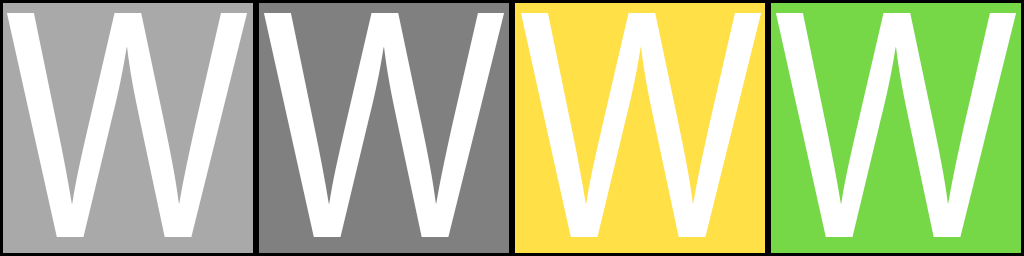
<style>
.page{position:relative;width:1024px;height:256px;background:#ffffff}
.page>*{position:absolute;margin:0}
.t1{font:332.5px "MyriadPro-Regular";color:#ffffff;scale:0.88 1}
</style>
<div class="page">
<p class="t1" style="left:7px;top:13px;width:240px;height:224px">W</p>
<p class="t1" style="left:264px;top:13px;width:240px;height:224px">W</p>
<p class="t1" style="left:521px;top:13px;width:240px;height:224px">W</p>
<p class="t1" style="left:776px;top:13px;width:240px;height:224px">W</p>
</div>
